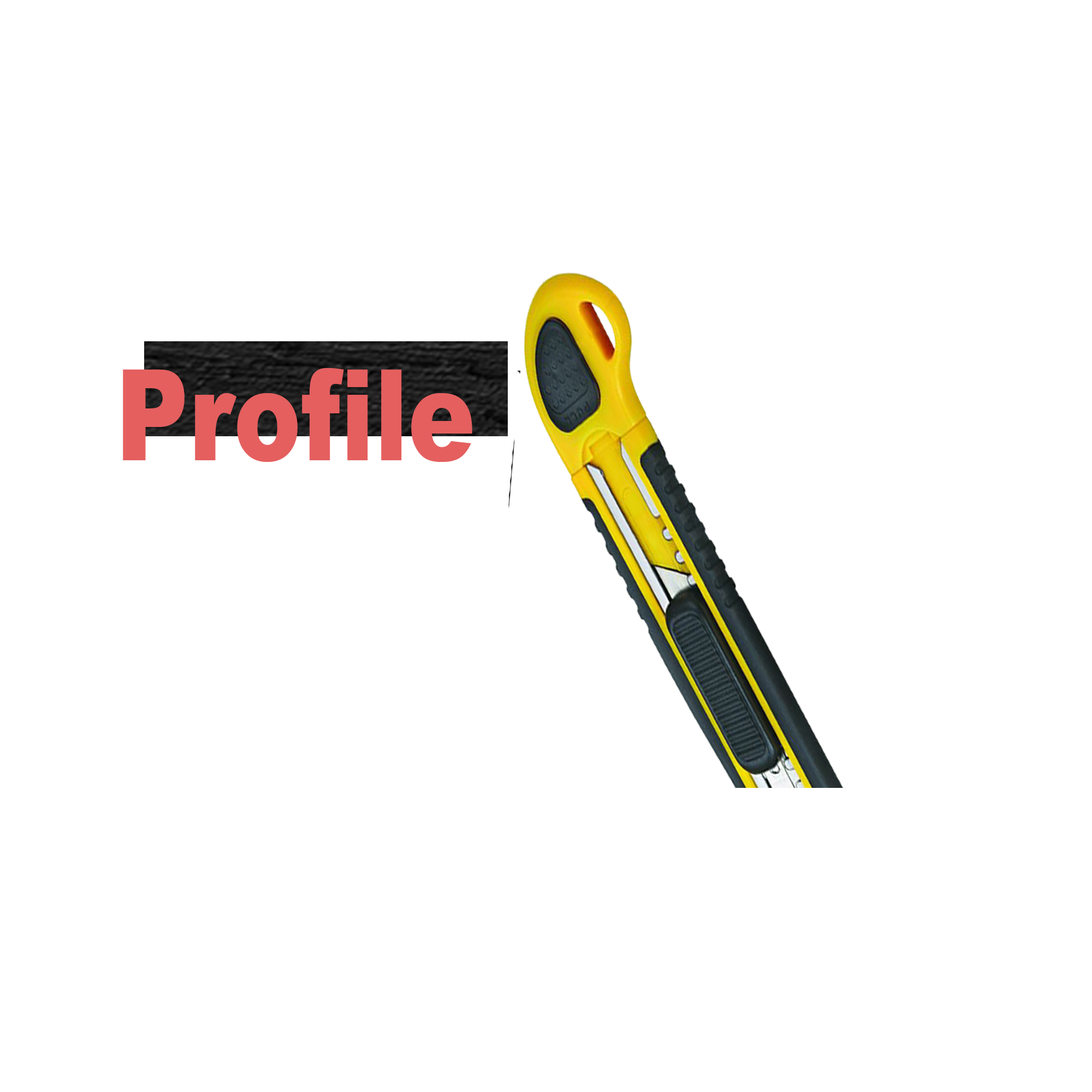
<style>
.page{position:relative;width:1092px;height:1092px;background:#ffffff}
.page>*{position:absolute;margin:0}
.t1{font:126.6px "Arial-Black";color:#e55f5f;scale:0.8 1}
</style>
<div class="page">
<p class="t1" style="left:123px;top:367px;width:349px;height:95px">Profile</p>
</div>
